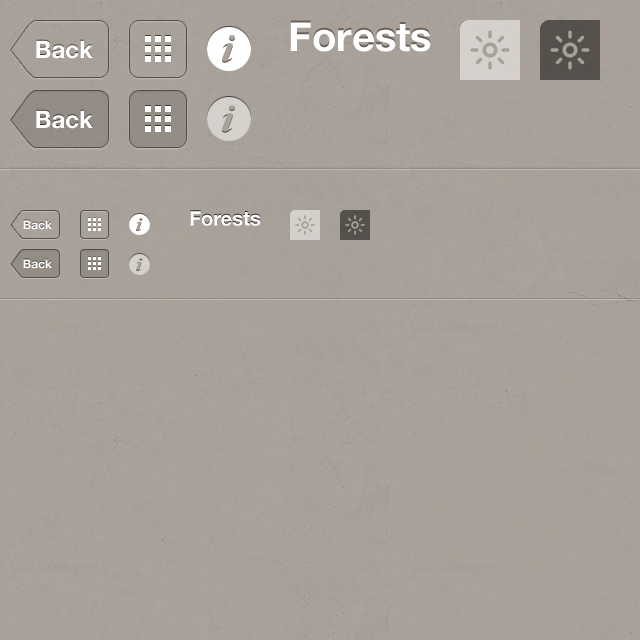
<style>
.page{position:relative;width:640px;height:640px;background:#aaa29a}
.page>*{position:absolute;margin:0}
.t1{font:40px "HelveticaNeue-Bold";color:#ffffff}
.t2{font:24px "HelveticaNeue-Bold";color:#ffffff}
.t3{font:12px "HelveticaNeue-Bold";color:#ffffff}
.t4{font:20px "HelveticaNeue-Bold";color:#ffffff}
</style>
<div class="page">
<p class="t1" style="left:290px;top:22px;width:141px;height:30px">Forests</p>
<p class="t2" style="left:36px;top:40px;width:57px;height:19px">Back</p>
<p class="t2" style="left:36px;top:110px;width:57px;height:19px">Back</p>
<p class="t3" style="left:23px;top:220px;width:29px;height:10px">Back</p>
<p class="t4" style="left:190px;top:211px;width:71px;height:15px">Forests</p>
<p class="t3" style="left:23px;top:259px;width:29px;height:10px">Back</p>
</div>
